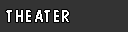
<style>
.page{position:relative;width:128px;height:32px;background:#333333}
.page>*{position:absolute;margin:0}
.t1{font:17.2px "DomCasualBT-Regular";letter-spacing:0.05em;color:#ffffff;scale:1.05 1}
</style>
<div class="page">
<p class="t1" style="left:6px;top:10px;width:63px;height:12px">THEATER</p>
</div>
